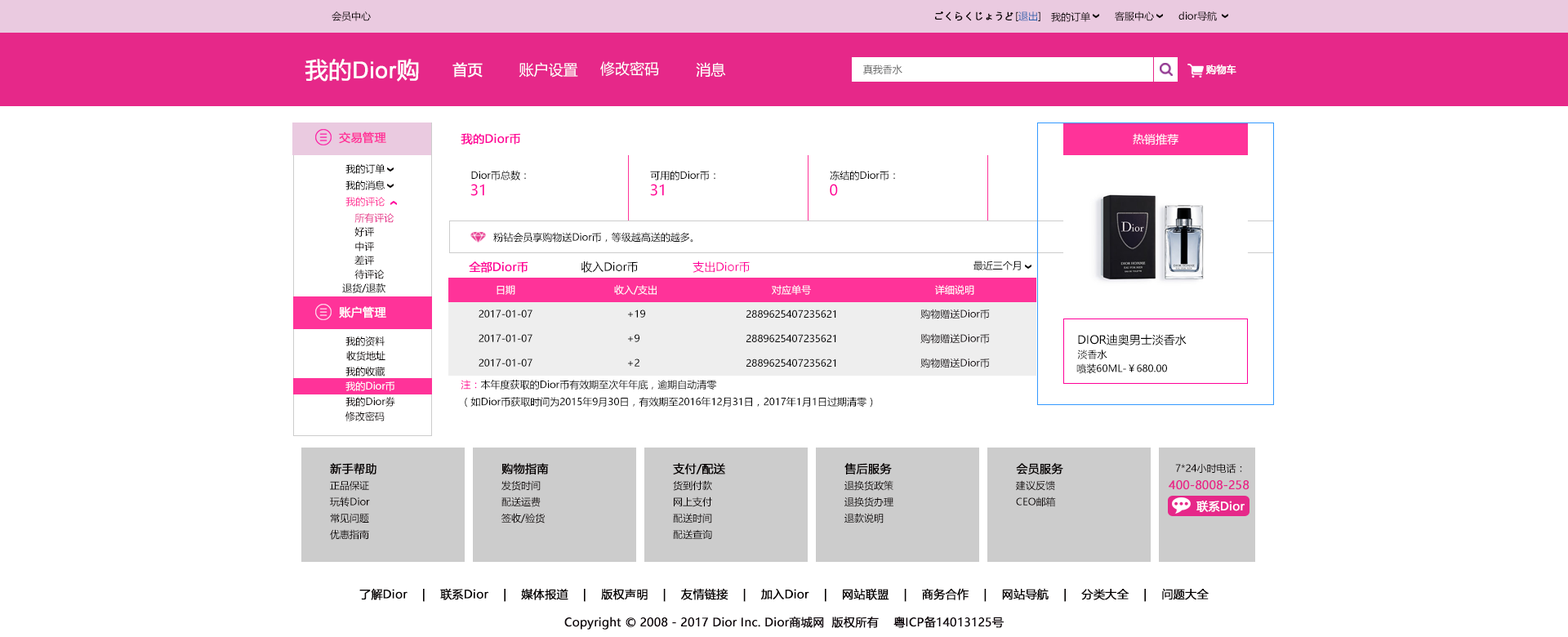
<style>
.page{position:relative;width:1568px;height:637px;background:#ffffff}
.page>*{position:absolute;margin:0}
.t1{font:9.8px "MicrosoftYaHei";color:#040000}
.t2{font:9.8px "MicrosoftYaHei";color:#040000;font-weight:bold}
.t3{font:9.8px "MicrosoftYaHei";color:#2a62ae}
.t4{font:22.9px "ArialMT";color:#ffffff;font-weight:bold}
.t5{font:22.9px "MicrosoftYaHei";color:#ffffff;font-weight:bold}
.t6{font:14.7px "MicrosoftYaHei";color:#ffffff;font-weight:bold}
.t7{font:14.7px "MicrosoftYaHei";color:#ffffff}
.t8{font:9.8px "MicrosoftYaHei";color:#666666}
.t9{font:9.8px "MicrosoftYaHei";color:#ffffff;font-weight:bold}
.t10{font:11.4px "MicrosoftYaHei";color:#ff3399;font-weight:bold}
.t11{font:11.4px "MicrosoftYaHei";color:#ff0099;font-weight:bold}
.t12{font:11.4px "MicrosoftYaHei";color:#ffffff}
.t13{font:9.8px "MicrosoftYaHei";color:#000000}
.t14{font:14.7px "MicrosoftYaHei";color:#ff0099}
.t15{font:9.8px "MicrosoftYaHei";color:#ff3399}
.t16{font:9.8px "MicrosoftYaHei";color:#e62889}
.t17{font:11.4px "MicrosoftYaHei";color:#000000}
.t18{font:11.4px "MicrosoftYaHei";color:#ff0099}
.t19{font:9.8px "MicrosoftYaHei";color:#ffffff}
.t20{font:11.4px "MicrosoftYaHei";color:#ffffff;font-weight:bold}
.t21{font:9.8px "MicrosoftYaHei";color:#0e050a}
.t22{font:9.8px "MicrosoftYaHei";color:#ff0099}
.t23{font:11.4px "MicrosoftYaHei";color:#040000;font-weight:bold}
.t24{font:11.4px "MicrosoftYaHei";color:#e62889;font-weight:bold}
.t25{font:11.4px "MicrosoftYaHei";color:#000000;font-weight:bold}
</style>
<div class="page">
<p class="t1" style="left:332px;top:11px;width:39px;height:10px">会员中心</p>
<p class="t2" style="left:935px;top:11px;width:78px;height:10px">ごくらくじょうど</p>
<p class="t3" style="left:1016px;top:11px;width:24px;height:10px"><span class="t1">[</span>退出<span class="t1">]</span></p>
<p class="t1" style="left:1051px;top:11px;width:39px;height:11px">我的订单</p>
<p class="t1" style="left:1115px;top:11px;width:39px;height:10px">客服中心</p>
<p class="t1" style="left:1178px;top:11px;width:39px;height:10px">dior导航</p>
<p class="t4" style="left:305px;top:59px;width:114px;height:23px"><span class="t5">我的</span>Dior<span class="t5">购</span></p>
<p class="t6" style="left:452px;top:62px;width:31px;height:16px">首页</p>
<p class="t7" style="left:519px;top:62px;width:59px;height:16px">账户设置</p>
<p class="t7" style="left:600px;top:61px;width:59px;height:15px">修改密码</p>
<p class="t7" style="left:696px;top:62px;width:30px;height:15px">消息</p>
<p class="t8" style="left:863px;top:65px;width:39px;height:9px">真我香水</p>
<p class="t9" style="left:1205px;top:65px;width:31px;height:10px">购物车</p>
<p class="t10" style="left:339px;top:131px;width:47px;height:13px">交易管理</p>
<p class="t11" style="left:461px;top:133px;width:59px;height:12px">我的Dior币</p>
<p class="t12" style="left:1133px;top:133px;width:45px;height:12px">热销推荐</p>
<p class="t13" style="left:345px;top:163px;width:40px;height:11px">我的订单</p>
<p class="t13" style="left:471px;top:171px;width:55px;height:9px">Dior币总数：</p>
<p class="t13" style="left:650px;top:171px;width:65px;height:9px">可用的Dior币：</p>
<p class="t13" style="left:830px;top:171px;width:65px;height:9px">冻结的Dior币：</p>
<p class="t13" style="left:345px;top:180px;width:40px;height:10px">我的消息</p>
<p class="t14" style="left:470px;top:184px;width:14px;height:12px">31</p>
<p class="t14" style="left:650px;top:184px;width:14px;height:12px">31</p>
<p class="t14" style="left:830px;top:184px;width:8px;height:12px">0</p>
<p class="t15" style="left:345px;top:197px;width:40px;height:10px">我的评论</p>
<p class="t16" style="left:354px;top:213px;width:40px;height:10px">所有评论</p>
<p class="t1" style="left:354px;top:227px;width:20px;height:10px">好评</p>
<p class="t13" style="left:493px;top:232px;width:200px;height:11px">粉钻会员享购物送Dior币，等级越高送的越多。</p>
<p class="t1" style="left:355px;top:242px;width:19px;height:10px">中评</p>
<p class="t1" style="left:354px;top:255px;width:20px;height:10px">差评</p>
<p class="t1" style="left:354px;top:270px;width:31px;height:9px">待评论</p>
<p class="t11" style="left:469px;top:261px;width:59px;height:12px">全部Dior币</p>
<p class="t17" style="left:581px;top:261px;width:57px;height:12px">收入Dior币</p>
<p class="t18" style="left:693px;top:261px;width:57px;height:12px">支出Dior币</p>
<p class="t13" style="left:973px;top:261px;width:48px;height:9px">最近三个月</p>
<p class="t13" style="left:342px;top:283px;width:43px;height:10px">退货/退款</p>
<p class="t19" style="left:497px;top:285px;width:18px;height:10px">日期</p>
<p class="t19" style="left:614px;top:285px;width:43px;height:10px">收入/支出</p>
<p class="t19" style="left:772px;top:285px;width:39px;height:10px">对应单号</p>
<p class="t19" style="left:935px;top:285px;width:39px;height:10px">详细说明</p>
<p class="t20" style="left:339px;top:306px;width:47px;height:12px">账户管理</p>
<p class="t13" style="left:479px;top:310px;width:53px;height:8px">2017-01-07</p>
<p class="t13" style="left:628px;top:310px;width:17px;height:8px">+19</p>
<p class="t13" style="left:746px;top:310px;width:90px;height:8px">2889625407235621</p>
<p class="t21" style="left:920px;top:309px;width:70px;height:10px">购物赠送Dior币</p>
<p class="t1" style="left:345px;top:336px;width:40px;height:10px">我的资料</p>
<p class="t13" style="left:479px;top:334px;width:53px;height:8px">2017-01-07</p>
<p class="t13" style="left:628px;top:334px;width:11px;height:8px">+9</p>
<p class="t13" style="left:746px;top:334px;width:90px;height:8px">2889625407235621</p>
<p class="t21" style="left:920px;top:333px;width:70px;height:11px">购物赠送Dior币</p>
<p class="t17" style="left:1078px;top:334px;width:109px;height:11px">DIOR迪奥男士淡香水</p>
<p class="t1" style="left:346px;top:351px;width:39px;height:10px">收货地址</p>
<p class="t13" style="left:1077px;top:350px;width:30px;height:9px">淡香水</p>
<p class="t13" style="left:479px;top:359px;width:53px;height:8px">2017-01-07</p>
<p class="t13" style="left:628px;top:359px;width:11px;height:8px">+2</p>
<p class="t13" style="left:746px;top:359px;width:90px;height:8px">2889625407235621</p>
<p class="t21" style="left:920px;top:358px;width:70px;height:10px">购物赠送Dior币</p>
<p class="t13" style="left:1076px;top:363px;width:91px;height:11px">喷装60ML-￥680.00</p>
<p class="t1" style="left:345px;top:367px;width:40px;height:9px">我的收藏</p>
<p class="t19" style="left:345px;top:381px;width:49px;height:10px">我的Dior币</p>
<p class="t13" style="left:461px;top:380px;width:412px;height:28px"><span class="t22">注：</span>本年度获取的Dior币有效期至次年年底，逾期自动清零<br>（如Dior币获取时间为2015年9月30日，有效期至2016年12月31日，2017年1月1日过期清零）</p>
<p class="t1" style="left:345px;top:397px;width:50px;height:10px">我的Dior券</p>
<p class="t1" style="left:345px;top:412px;width:40px;height:9px">修改密码</p>
<p class="t23" style="left:330px;top:463px;width:46px;height:11px">新手帮助</p>
<p class="t23" style="left:501px;top:463px;width:48px;height:11px">购物指南</p>
<p class="t23" style="left:673px;top:463px;width:52px;height:11px">支付/配送</p>
<p class="t23" style="left:844px;top:463px;width:48px;height:11px">售后服务</p>
<p class="t23" style="left:1016px;top:463px;width:47px;height:11px">会员服务</p>
<p class="t1" style="left:1175px;top:463px;width:67px;height:11px">7*24小时电话：</p>
<p class="t1" style="left:330px;top:481px;width:39px;height:10px">正品保证</p>
<p class="t1" style="left:501px;top:480px;width:40px;height:11px">发货时间</p>
<p class="t1" style="left:673px;top:480px;width:39px;height:11px">货到付款</p>
<p class="t1" style="left:844px;top:480px;width:49px;height:11px">退换货政策</p>
<p class="t1" style="left:1016px;top:480px;width:39px;height:11px">建议反馈</p>
<p class="t24" style="left:1169px;top:480px;width:81px;height:10px">400-8008-258</p>
<p class="t1" style="left:330px;top:497px;width:40px;height:10px">玩转Dior</p>
<p class="t1" style="left:501px;top:497px;width:40px;height:10px">配送运费</p>
<p class="t1" style="left:674px;top:497px;width:38px;height:10px">网上支付</p>
<p class="t1" style="left:844px;top:497px;width:49px;height:10px">退换货办理</p>
<p class="t1" style="left:1016px;top:497px;width:40px;height:10px">CEO邮箱</p>
<p class="t20" style="left:1196px;top:501px;width:49px;height:11px">联系Dior</p>
<p class="t1" style="left:330px;top:513px;width:39px;height:10px">常见问题</p>
<p class="t1" style="left:501px;top:513px;width:44px;height:10px">签收/验货</p>
<p class="t1" style="left:673px;top:513px;width:39px;height:10px">配送时间</p>
<p class="t1" style="left:844px;top:513px;width:40px;height:10px">退款说明</p>
<p class="t1" style="left:330px;top:529px;width:39px;height:11px">优惠指南</p>
<p class="t1" style="left:673px;top:529px;width:39px;height:10px">配送查询</p>
<p class="t23" style="left:359px;top:588px;width:850px;height:14px">了解Dior    |    联系Dior    |    媒体报道    |    版权声明    |    友情链接    |    加入Dior    |    网站联盟    |    商务合作    |    网站导航    |    分类大全    |    问题大全</p>
<p class="t25" style="left:564px;top:616px;width:440px;height:14px">Copyright © 2008 - 2017 Dior Inc. Dior商城网  版权所有    粤ICP备14013125号</p>
</div>
